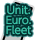
<style>
.page{position:relative;width:35px;height:40px;background:#033331}
.page>*{position:absolute;margin:0}
.t1{font:10px/10px "UDShinGoPro-Light";color:#3dc2a8;font-weight:bold}
</style>
<div class="page">
<p class="t1" style="left:6px;top:5px;width:25px;height:30px;text-align:center">Unit.<br>Euro.<br>Fleet</p>
</div>
